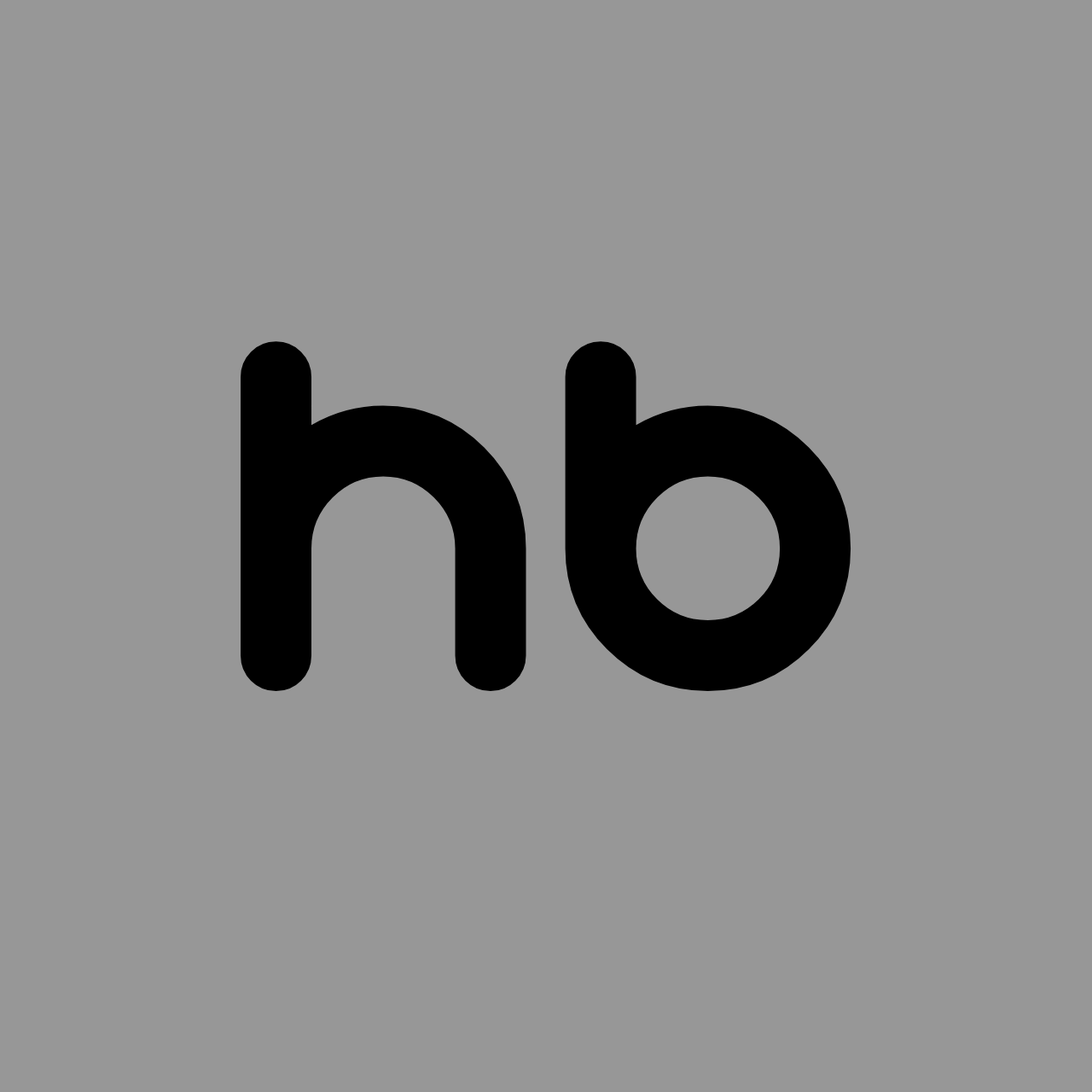
<style>
.page{position:relative;width:1092px;height:1092px;background:#979797}
.page>*{position:absolute;margin:0}
.t1{font:503.3px "TypoHoopDemo-Bold";color:#000000}
</style>
<div class="page">
<p class="t1" style="left:241px;top:341px;width:610px;height:350px">hb</p>
</div>
